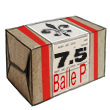
<style>
.page{position:relative;width:110px;height:110px;background:#ffffff}
.page>*{position:absolute;margin:0}
.t1{font:25px "Arial";letter-spacing:0.025em;color:#cc0000;scale:0.43 1}
</style>
<div class="page">
<p class="t1" style="left:53px;top:63px;width:33px;height:30px;rotate:-20deg">Balle P</p>
</div>
